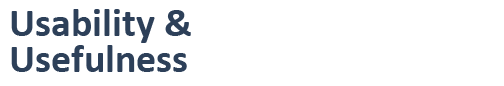
<style>
.page{position:relative;width:504px;height:86px;background:#ffffff}
.page>*{position:absolute;margin:0}
.t1{font:40px/36px "Calibri-Bold";color:#2d4059}
</style>
<div class="page">
<p class="t1" style="left:11px;top:9px;width:180px;height:63px">Usability &amp;<br>Usefulness</p>
</div>
